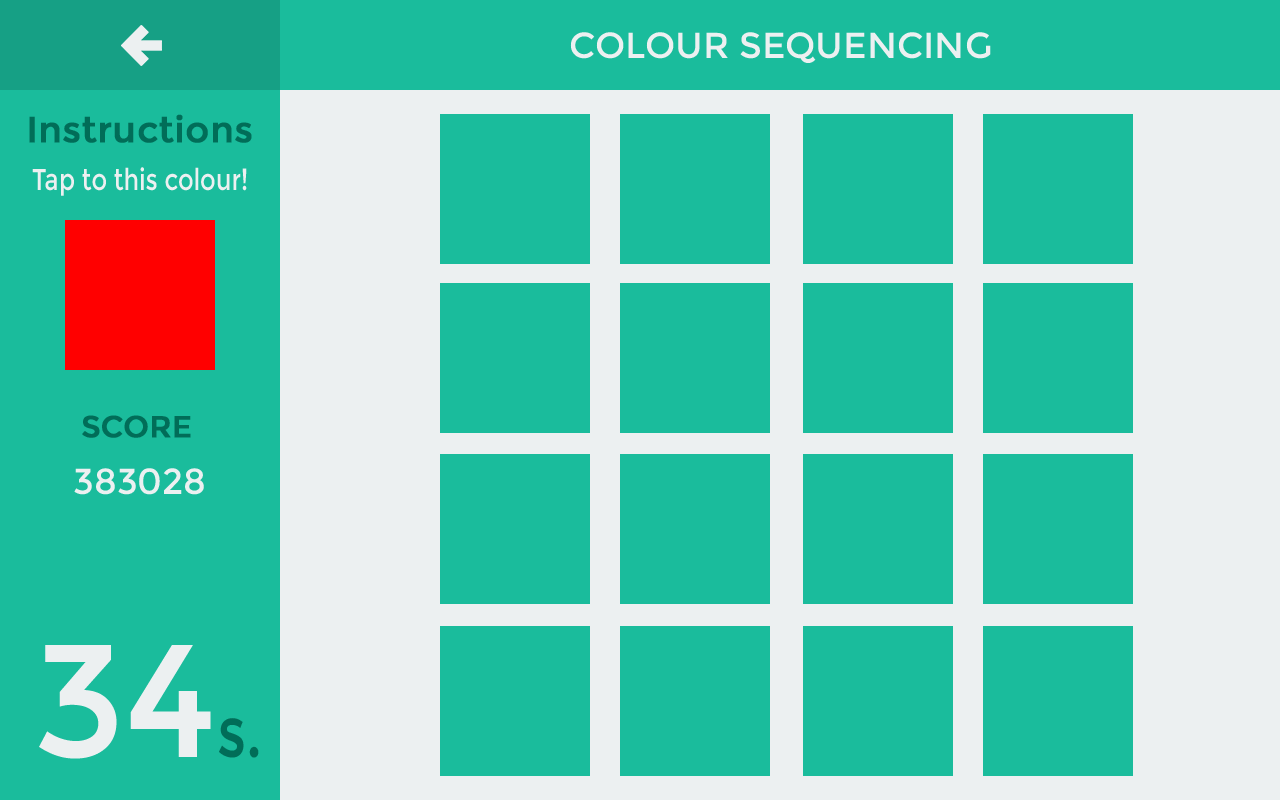
<style>
.page{position:relative;width:1280px;height:800px;background:#1abc9c}
.page>*{position:absolute;margin:0}
.t1{font:36px "Montserrat-Regular";color:#ecf0f1}
.t2{font:36px "Montserrat-Regular";color:#016d58;font-weight:bold}
.t3{font:30px "Montserrat-Regular";color:#ecf0f1;scale:0.8 1}
.t4{font:30px "Montserrat-Regular";color:#016d58;font-weight:bold}
.t5{font:160px "Montserrat-Regular";color:#ecf0f1}
.t6{font:72px "Montserrat-Regular";color:#016d58;scale:0.8 1}
</style>
<div class="page">
<p class="t1" style="left:570px;top:32px;width:421px;height:31px">COLOUR SEQUENCING</p>
<p class="t2" style="left:29px;top:114px;width:223px;height:29px">Instructions</p>
<p class="t3" style="left:32px;top:167px;width:215px;height:29px">Tap to this colour!</p>
<p class="t4" style="left:82px;top:415px;width:109px;height:23px">SCORE</p>
<p class="t1" style="left:74px;top:468px;width:130px;height:27px">383028</p>
<p class="t5" style="left:39px;top:645px;width:172px;height:114px">34</p>
<p class="t6" style="left:219px;top:718px;width:40px;height:40px">s.</p>
</div>
